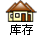
<style>
.page{position:relative;width:42px;height:36px;background:#ffffff}
.page>*{position:absolute;margin:0}
.t1{font:12px "SimSun";letter-spacing:0.02em;color:#000000}
</style>
<div class="page">
<p class="t1" style="left:10px;top:24px;width:23px;height:11px">库存</p>
</div>
